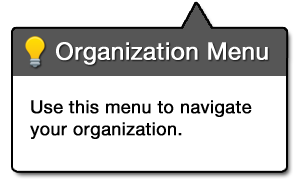
<style>
.page{position:relative;width:298px;height:183px;background:#ffffff}
.page>*{position:absolute;margin:0}
.t1{font:24px "HelveticaNeue";color:#ffffff;font-weight:bold}
.t2{font:18px "HelveticaNeue";color:#000000;font-weight:bold}
</style>
<div class="page">
<p class="t1" style="left:56px;top:42px;width:212px;height:23px">Organization Menu</p>
<p class="t2" style="left:30px;top:100px;width:222px;height:39px">Use this menu to navigate<br>your organization.</p>
</div>
